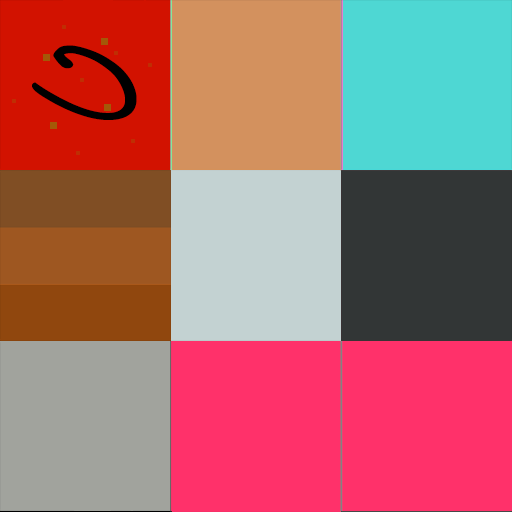
<style>
.page{position:relative;width:512px;height:512px;background:#ff316a}
.page>*{position:absolute;margin:0}
.t1{font:96.1px "SegoeScript";color:#000000;scale:1.4 1}
</style>
<div class="page">
<p class="t1" style="left:32px;top:45px;width:105px;height:75px;rotate:180deg">C</p>
</div>
